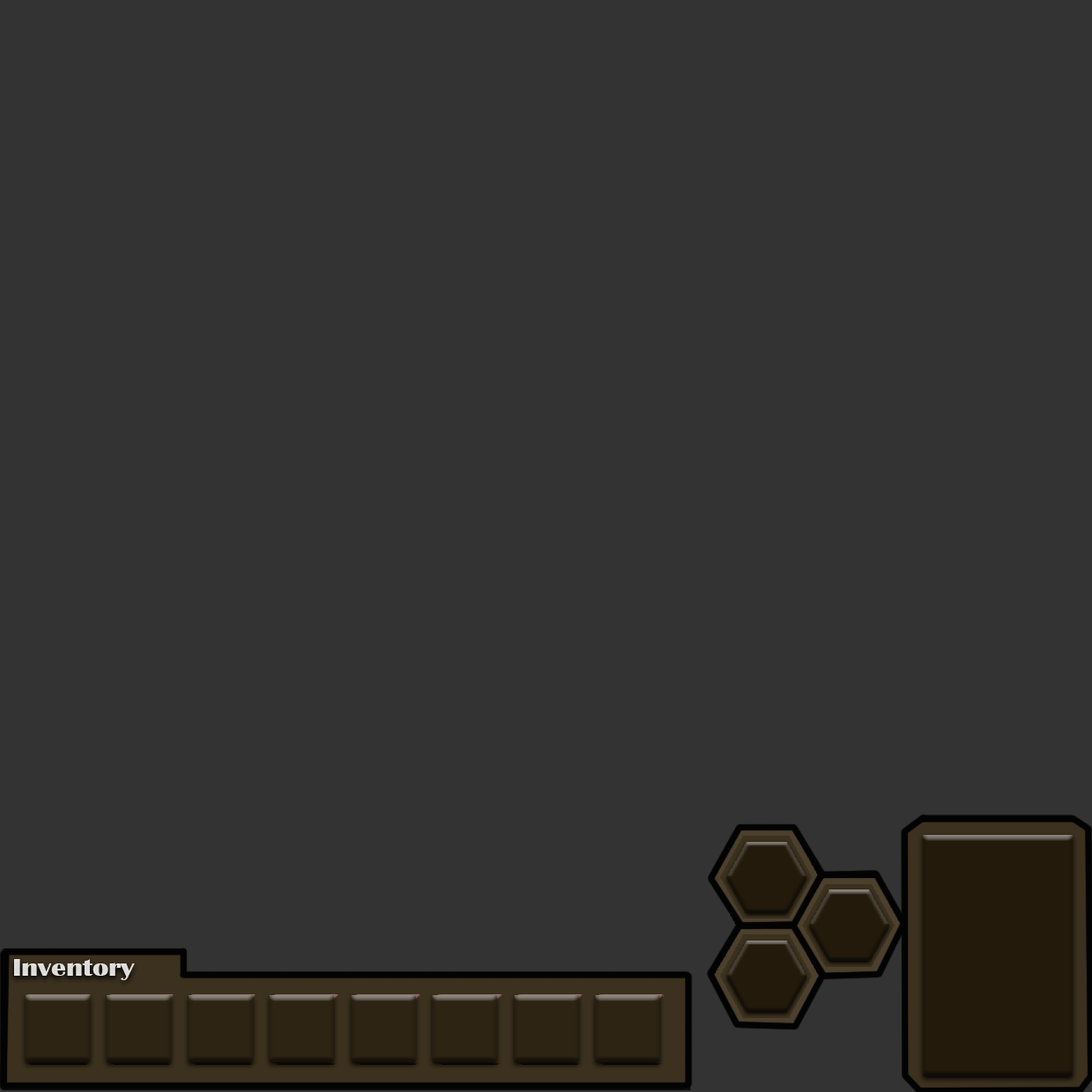
<style>
.page{position:relative;width:1092px;height:1092px;background:#333333}
.page>*{position:absolute;margin:0}
.t1{font:24.7px "BritannicBold";color:#d3d1cd;scale:1.2 1}
</style>
<div class="page">
<p class="t1" style="left:14px;top:959px;width:121px;height:21px">Inventory</p>
</div>
